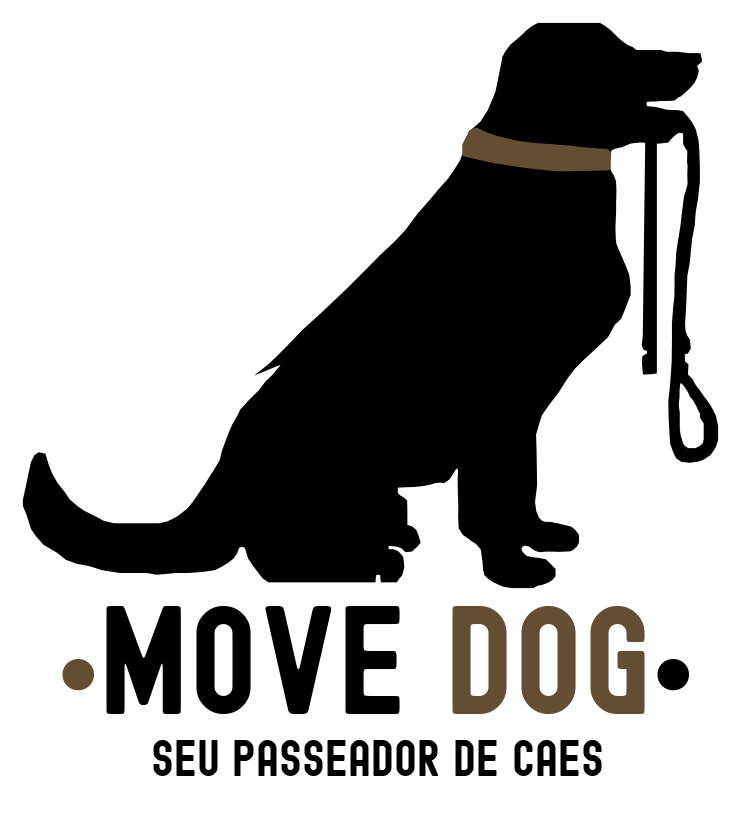
<style>
.page{position:relative;width:741px;height:813px;background:#ffffff}
.page>*{position:absolute;margin:0}
.t1{font:150px "Edmund-Free";color:#000000}
.t2{font:150px "MyriadPro-Regular";color:#634e33}
.t3{font:150px "Edmund-Free";color:#634e33}
.t4{font:150px "MyriadPro-Regular";color:#000000}
.t5{font:50px "Edmund-Free";color:#000000}
</style>
<div class="page">
<p class="t1" style="left:62px;top:606px;width:627px;height:108px"><span class="t2">•</span>move <span class="t3">dog</span><span class="t4">•</span></p>
<p class="t5" style="left:153px;top:740px;width:449px;height:36px">Seu passeador de caes</p>
</div>
